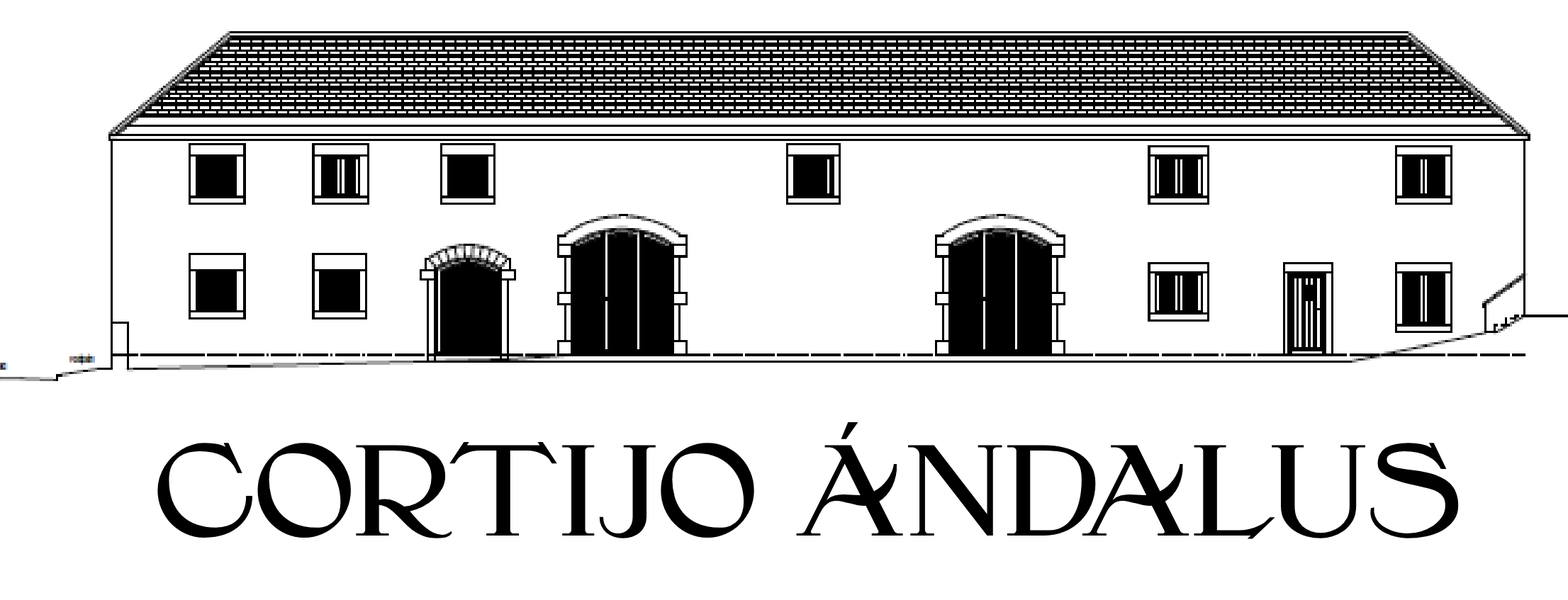
<style>
.page{position:relative;width:1568px;height:600px;background:#ffffff}
.page>*{position:absolute;margin:0}
.t1{font:106.3px "JonquinW01-Regular";color:#000000}
</style>
<div class="page">
<p class="t1" style="left:157px;top:422px;width:1302px;height:117px">CORTIJO ÁNDALUS</p>
</div>
